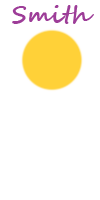
<style>
.page{position:relative;width:100px;height:200px;background:#ffffff}
.page>*{position:absolute;margin:0}
.t1{font:24px "SegoeScript-Bold";color:#9e3e98}
</style>
<div class="page">
<p class="t1" style="left:12px;top:5px;width:82px;height:19px">Smith</p>
</div>
